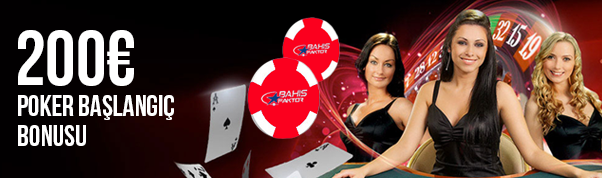
<style>
.page{position:relative;width:602px;height:178px}
.page>*{position:absolute;margin:0}
.t1{font:77px "BebasNeue";color:#ffffff}
.t2{font:29px/30px "BebasNeue";color:#ffffff}
</style>
<div class="page">
<p class="t1" style="left:18px;top:30px;width:116px;height:56px">200€</p>
<p class="t2" style="left:18px;top:95px;width:156px;height:51px">poker başlangıç <br>bonusu</p>
</div>
